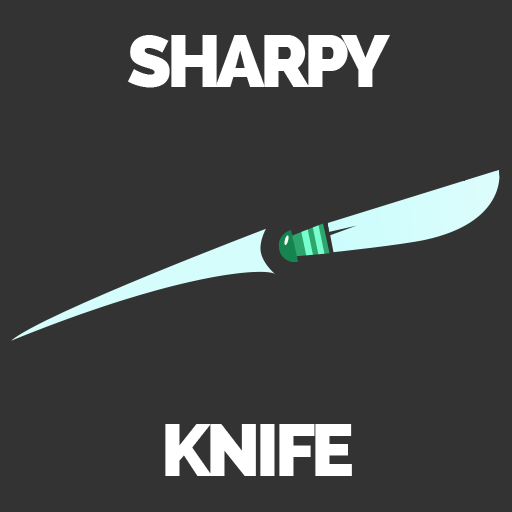
<style>
.page{position:relative;width:512px;height:512px;background:#333333}
.page>*{position:absolute;margin:0}
.t1{font:72px "Raleway-Heavy";letter-spacing:-0.05em;color:#ffffff}
</style>
<div class="page">
<p class="t1" style="left:127px;top:35px;width:263px;height:53px">SHARPY</p>
<p class="t1" style="left:165px;top:424px;width:187px;height:52px">KNIFE</p>
</div>
